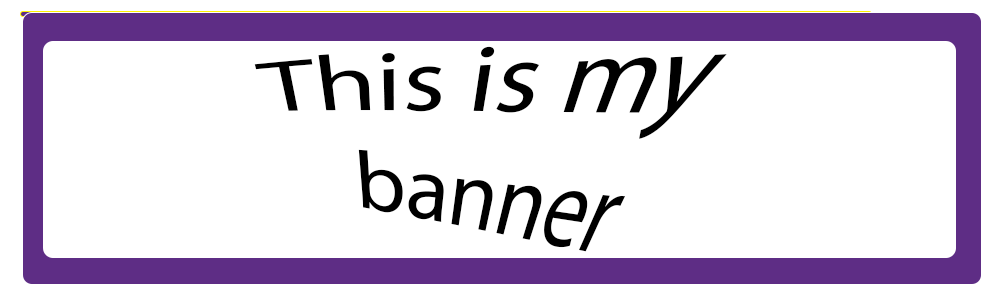
<style>
.page{position:relative;width:1000px;height:300px;background:#ffffff}
.page>*{position:absolute;margin:0}
.t1{font:100px "MyriadPro-Regular";color:#000000}
.t2{font:100px "MyriadPro-Regular";color:#ffffff}
</style>
<div class="page">
<p class="t1" style="left:254px;top:46px;width:473px;height:206px"><span class="t2">           </span>This is my<br>banner</p>
</div>
